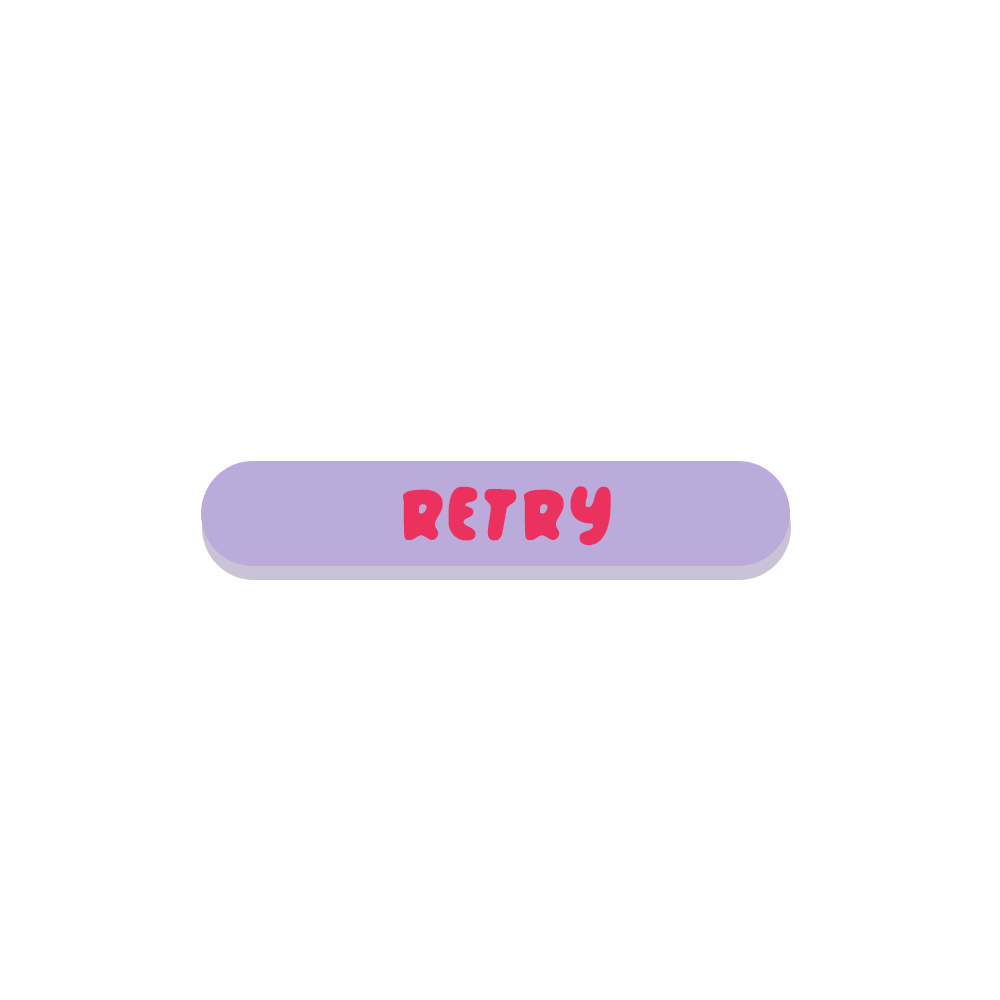
<style>
.page{position:relative;width:1000px;height:1000px;background:#ffffff}
.page>*{position:absolute;margin:0}
.t1{font:85px "BomberBalloon";letter-spacing:0.08em;color:#eb325f}
</style>
<div class="page">
<p class="t1" style="left:403px;top:486px;width:208px;height:59px">Retry</p>
</div>
